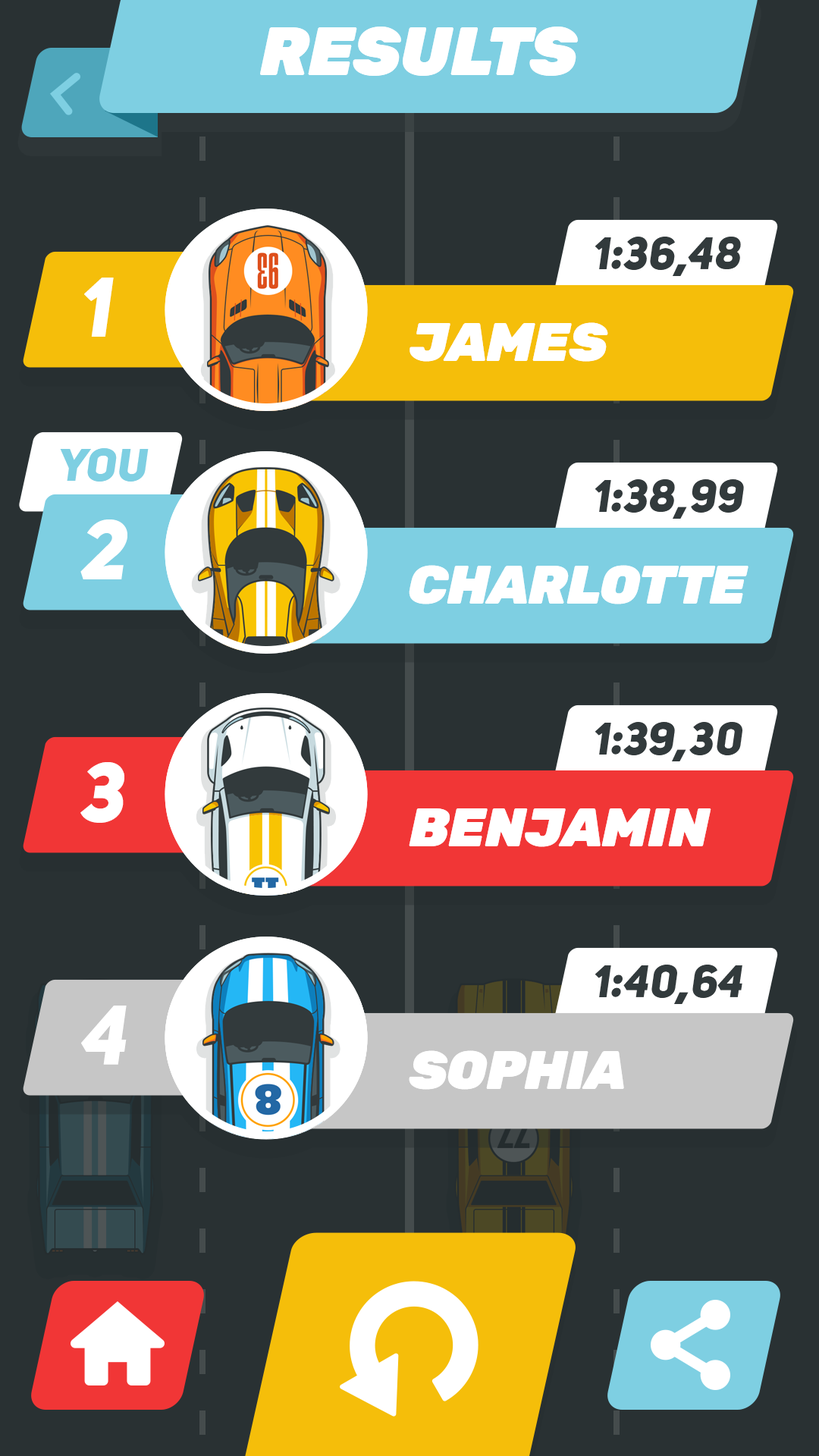
<style>
.page{position:relative;width:819px;height:1456px;background:#293133}
.page>*{position:absolute;margin:0}
.t1{font:68.2px "Rubik-BlackItalic";color:#ffffff;text-transform:uppercase}
.t2{font:45.5px "UniSansHeavyItalicCAPS";letter-spacing:0.025em;color:#323a3c}
.t3{font:83.4px "UniSansHeavyItalicCAPS";letter-spacing:0.025em;color:#ffffff}
.t4{font:54.6px "Rubik-BlackItalic";color:#ffffff;text-transform:uppercase}
.t5{font:45.5px "UniSansHeavyItalicCAPS";letter-spacing:0.025em;color:#7ecfe2}
</style>
<div class="page">
<p class="t1" style="left:260px;top:27px;width:318px;height:49px">results</p>
<p class="t2" style="left:595px;top:237px;width:146px;height:39px">1:36,48</p>
<p class="t3" style="left:84px;top:278px;width:30px;height:59px">1</p>
<p class="t4" style="left:409px;top:322px;width:199px;height:40px">james</p>
<p class="t5" style="left:60px;top:448px;width:89px;height:34px">you</p>
<p class="t2" style="left:595px;top:479px;width:149px;height:40px">1:38,99</p>
<p class="t3" style="left:80px;top:519px;width:47px;height:60px">2</p>
<p class="t4" style="left:409px;top:565px;width:339px;height:39px">charlotte</p>
<p class="t2" style="left:595px;top:722px;width:147px;height:39px">1:39,30</p>
<p class="t3" style="left:80px;top:762px;width:44px;height:61px">3</p>
<p class="t4" style="left:409px;top:808px;width:302px;height:39px">benjamin</p>
<p class="t2" style="left:595px;top:965px;width:147px;height:39px">1:40,64</p>
<p class="t3" style="left:81px;top:1006px;width:46px;height:59px">4</p>
<p class="t4" style="left:409px;top:1050px;width:215px;height:40px">sophia</p>
</div>
